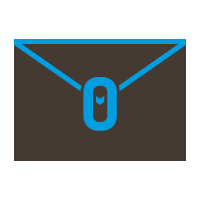
<style>
.page{position:relative;width:200px;height:200px;background:#443a31}
.page>*{position:absolute;margin:0}
.t1{font:83px "ConduitITC-Bold";color:#009ee0;text-transform:uppercase}
.t2{font:83px "ConduitITCLight";color:#009ee0;text-transform:uppercase}
</style>
<div class="page">
<p class="t1" style="left:83px;top:77px;width:34px;height:54px"><span class="t2"><br></span>0</p>
</div>
